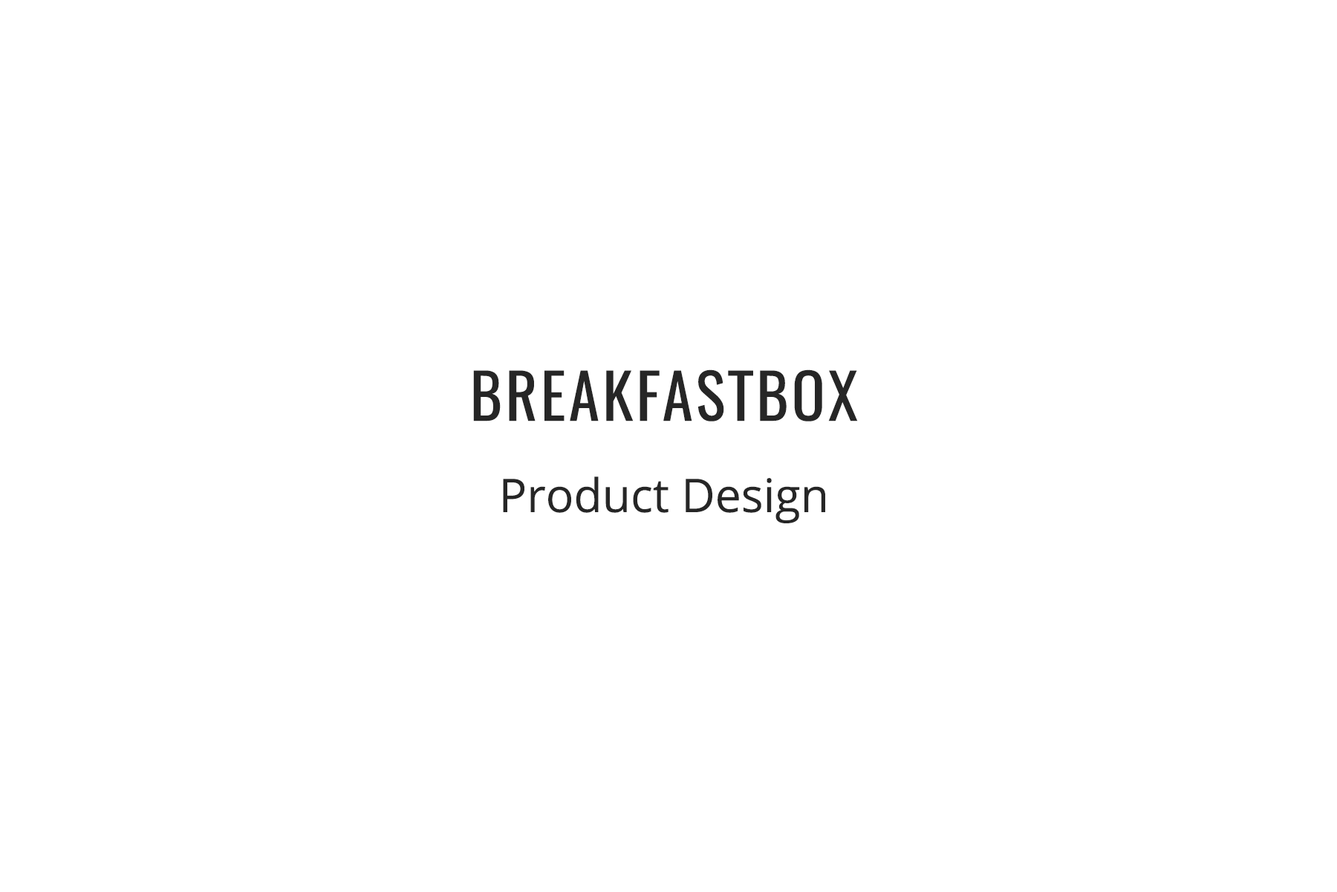
<style>
.page{position:relative;width:1337px;height:892px;background:#ffffff}
.page>*{position:absolute;margin:0}
.t1{font:46.4px/44.9px "OpenSans";color:#262626}
.t2{font:61.9px/44.9px "Oswald-Regular";letter-spacing:0.05em;color:#262626;text-transform:uppercase}
</style>
<div class="page">
<p class="t1" style="left:473px;top:369px;width:385px;height:154px;text-align:center"><span class="t2">breakfastbox<br></span>Product Design</p>
</div>
